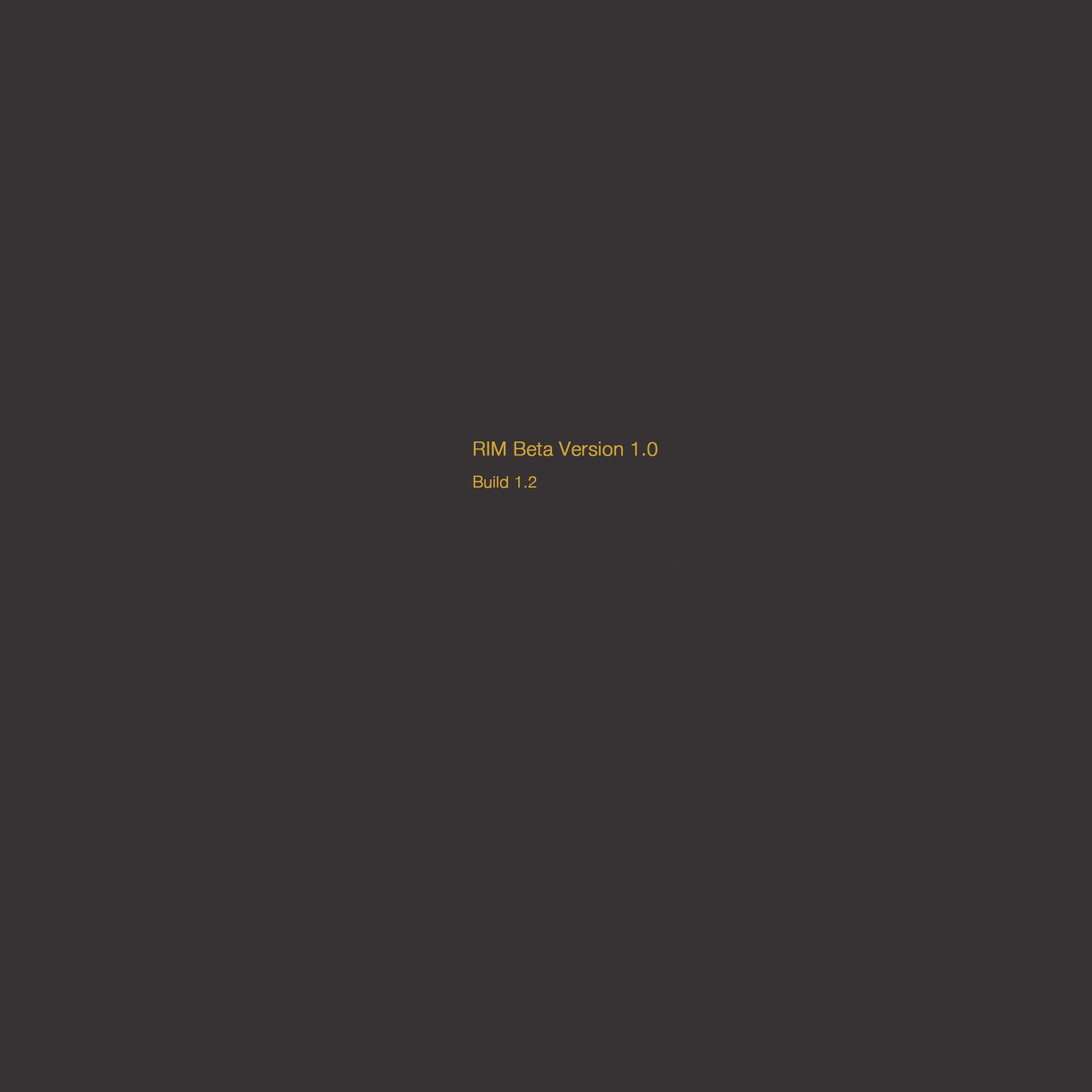
<style>
.page{position:relative;width:1092px;height:1092px;background:#373334}
.page>*{position:absolute;margin:0}
.t1{font:19.2px "HelveticaNeue-Light";color:#d1a236;font-weight:bold}
.t2{font:16px "HelveticaNeue-Light";color:#d1a236;font-weight:bold}
</style>
<div class="page">
<p class="t1" style="left:473px;top:441px;width:184px;height:15px">RIM Beta Version 1.0</p>
<p class="t2" style="left:473px;top:476px;width:63px;height:12px">Build 1.2</p>
</div>
